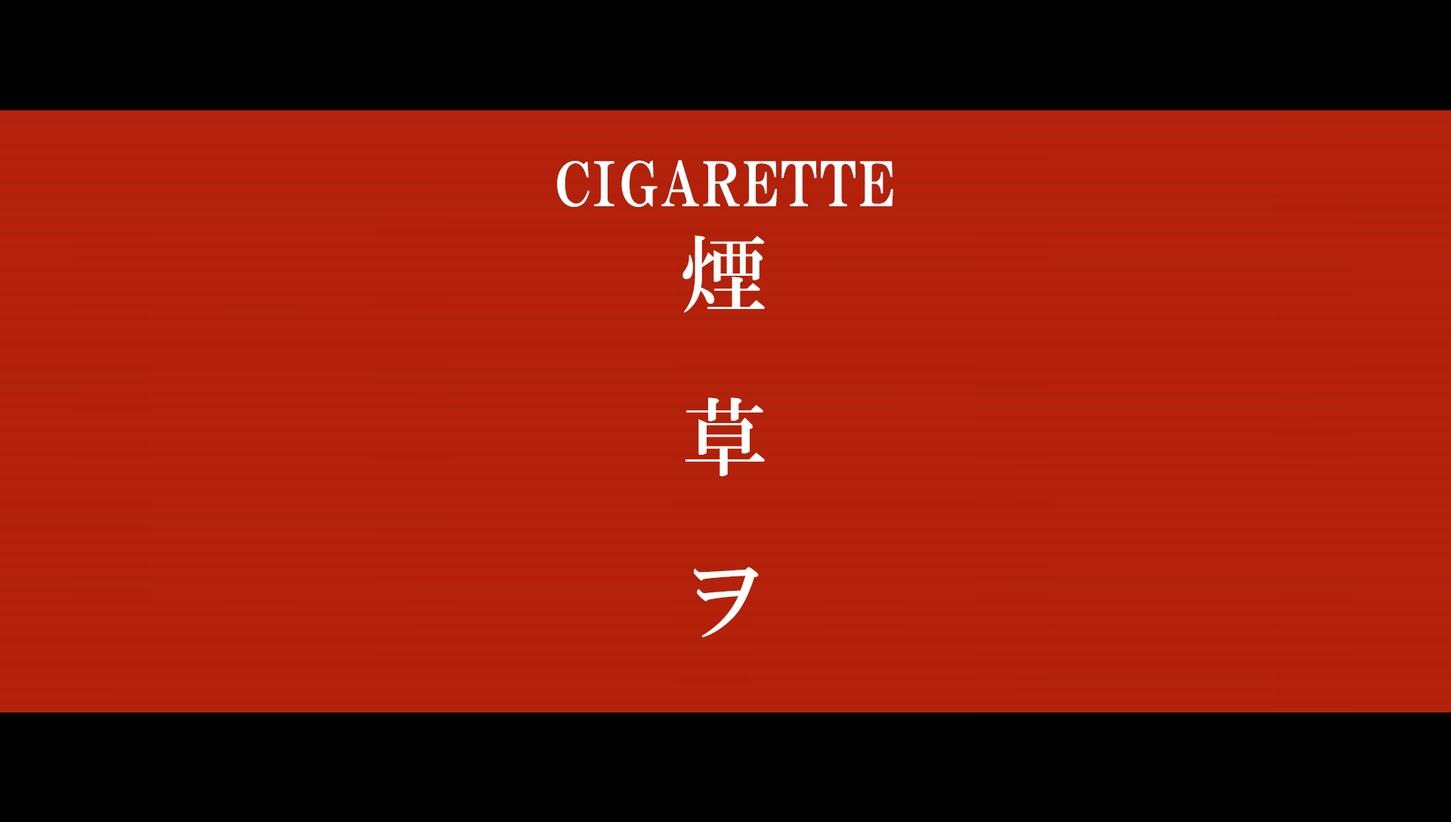
<style>
.page{position:relative;width:1451px;height:822px;background:#000000}
.page>*{position:absolute;margin:0}
.t1{font:60.4px "HGPMinchoE";letter-spacing:0.05em;color:#ffffff;text-transform:uppercase}
.t2{font:85.4px/163.2px "HGMinchoB";letter-spacing:0.15em;color:#fdfdfa}
</style>
<div class="page">
<p class="t1" style="left:557px;top:160px;width:336px;height:47px">cigarette</p>
<p class="t2" style="left:682px;top:235px;width:83px;height:403px;text-align:center">煙<br>草<br>ヲ</p>
</div>
